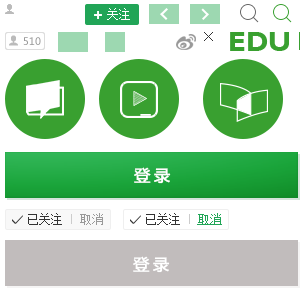
<style>
.page{position:relative;width:300px;height:300px;background:#ffffff}
.page>*{position:absolute;margin:0}
.t1{font:12px "SimSun";color:#333333}
.t2{font:10px "SimSun";color:#cccccc}
.t3{font:12px "SimSun";color:#999999}
.t4{font:16px "MicrosoftYaHei";letter-spacing:0.2em;color:#ffffff;font-weight:bold}
</style>
<div class="page">
<p class="t1" style="left:28px;top:213px;width:75px;height:12px">已关注 <span class="t2">|</span><span class="t3"> 取消</span></p>
<p class="t4" style="left:133px;top:256px;width:37px;height:17px">登录</p>
</div>
